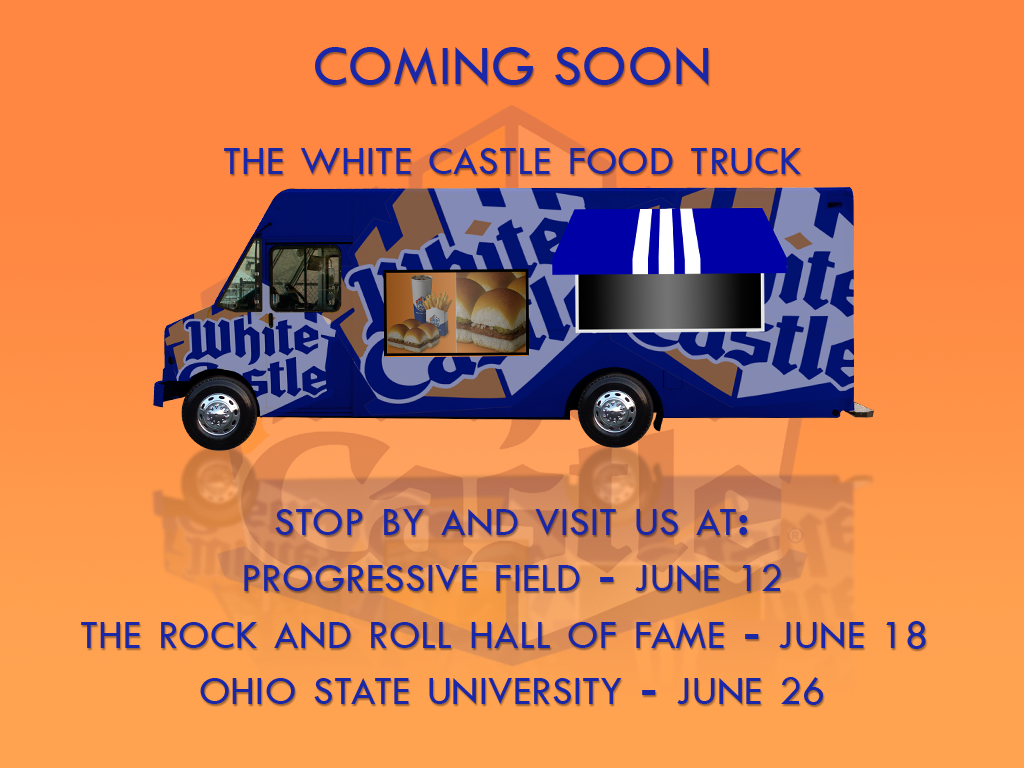
<style>
.page{position:relative;width:1024px;height:768px;background:#ff8742}
.page>*{position:absolute;margin:0}
.t1{font:57.9px "TwCenMT-Regular";letter-spacing:0.01em;color:#1a28a7;font-variant:small-caps}
.t2{font:57.9px/56.2px "TwCenMT-Regular";letter-spacing:0.01em;color:#1a28a7;font-variant:small-caps}
.t3{font:41.7px/56.2px "TwCenMT-Regular";letter-spacing:0.01em;color:#1a28a7;font-variant:small-caps}
</style>
<div class="page">
<p class="t1" style="left:315px;top:47px;width:394px;height:38px">COMING SOON</p>
<p class="t1" style="left:224px;top:148px;width:577px;height:26px">the white castle food truck</p>
<p class="t2" style="left:81px;top:509px;width:845px;height:196px;text-align:center">stop by and visit us at:<br>progressive field - june <span class="t3">12<br></span>the rock and roll hall of fame - june <span class="t3">18</span> <br>ohio state university - june <span class="t3">26</span></p>
</div>
